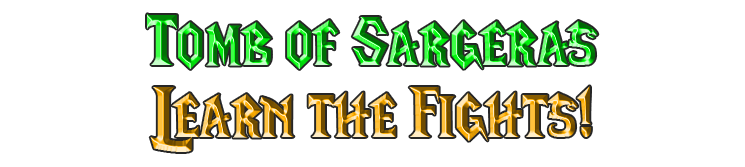
<style>
.page{position:relative;width:745px;height:167px;background:#ffffff}
.page>*{position:absolute;margin:0}
.t1{font:72px "LifeCraft"}
</style>
<div class="page">
<p class="t1" style="left:147px;top:14px;width:451px;height:55px">Tomb of Sargeras</p>
<p class="t1" style="left:150px;top:86px;width:441px;height:66px">Learn the Fights!</p>
</div>
